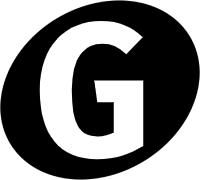
<style>
.page{position:relative;width:200px;height:180px;background:#000000}
.page>*{position:absolute;margin:0}
.t1{font:190px "FiraMono-Bold";color:#ffffff}
.t2{font:190px "FiraMono-Bold";color:#ffffff;scale:0.31 1}
</style>
<div class="page">
<p class="t1" style="left:39px;top:20px;width:105px;height:140px"><span class="t2"> </span>G</p>
</div>
